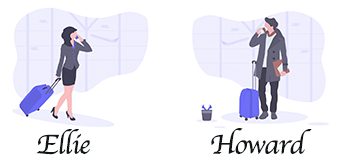
<style>
.page{position:relative;width:339px;height:168px;background:#ffffff}
.page>*{position:absolute;margin:0}
.t1{font:28.2px "Apple-Chancery";letter-spacing:-0.035em;color:#0f1417;scale:1.06 1}
</style>
<div class="page">
<p class="t1" style="left:36px;top:129px;width:54px;height:26px">Ellie</p>
<p class="t1" style="left:211px;top:128px;width:101px;height:26px">Howard</p>
</div>
